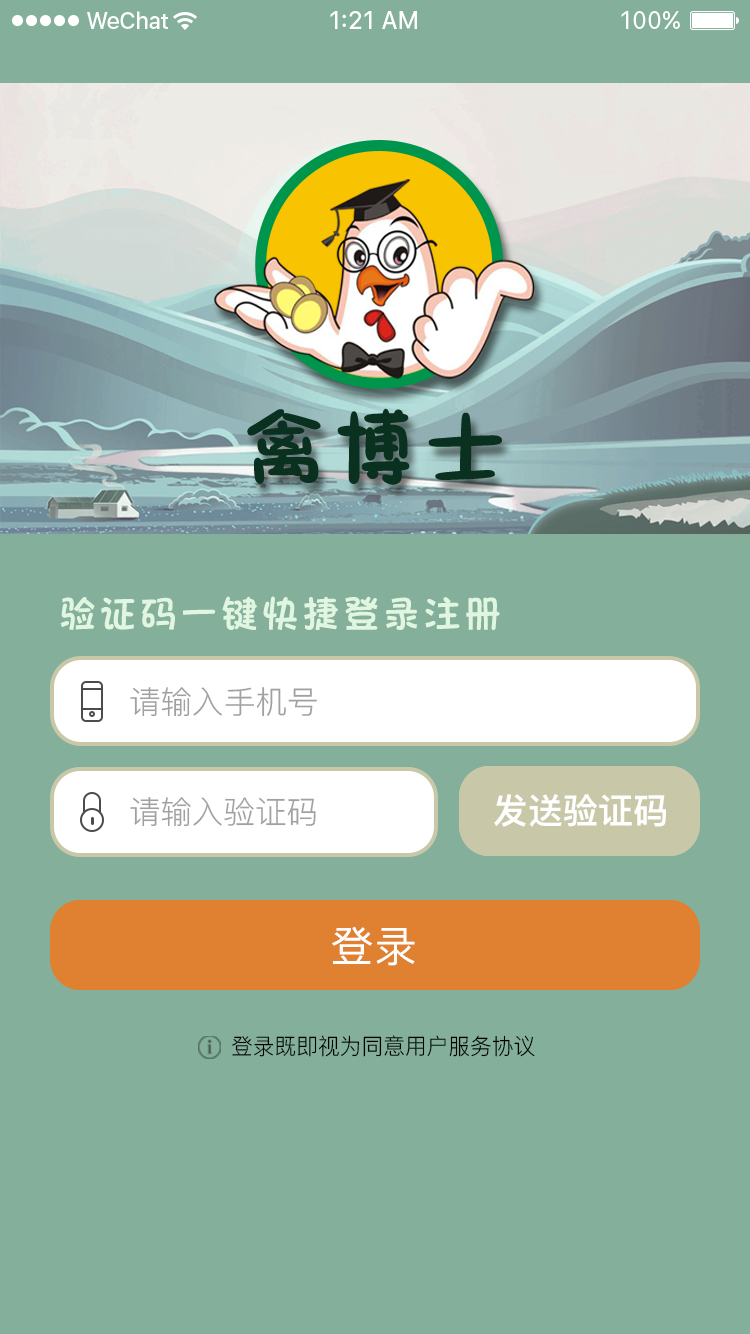
<style>
.page{position:relative;width:750px;height:1334px;background:#83af9b}
.page>*{position:absolute;margin:0}
.t1{font:83.1px "FZSEJW--GB1-0";letter-spacing:0.1em;color:#0a3020;text-transform:uppercase}
.t2{font:37px "DFPFangYuanW7";letter-spacing:0.1em;color:#e0f6e0;text-transform:uppercase}
.t3{font:31.5px "PingFang-SC-Regular";color:#a1a1a1}
.t4{font:35px "PingFang-SC-Heavy";color:#ffffff}
.t5{font:42.4px "PingFang-SC-Medium";color:#ffffff}
.t6{font:22.4px "PingFang-SC-Regular";color:#000000}
</style>
<div class="page">
<p class="t1" style="left:247px;top:408px;width:255px;height:77px">禽博士</p>
<p class="t2" style="left:60px;top:596px;width:440px;height:34px">验证码一键快捷登录注册</p>
<p class="t3" style="left:130px;top:687px;width:187px;height:30px">请输入手机号</p>
<p class="t3" style="left:130px;top:797px;width:186px;height:30px">请输入验证码</p>
<p class="t4" style="left:494px;top:794px;width:172px;height:33px">发送验证码</p>
<p class="t5" style="left:332px;top:926px;width:83px;height:40px">登录</p>
<p class="t5" style="left:332px;top:926px;width:83px;height:40px">登录</p>
<p class="t6" style="left:232px;top:1035px;width:303px;height:22px">登录既即视为同意用户服务协议</p>
</div>
